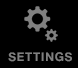
<style>
.page{position:relative;width:78px;height:68px;background:#000000}
.page>*{position:absolute;margin:0}
.t1{font:12.1px "AlteHaasGrotesk_Bold";letter-spacing:0.05em;color:#808080}
</style>
<div class="page">
<p class="t1" style="left:8px;top:52px;width:64px;height:10px">SETTINGS</p>
</div>
